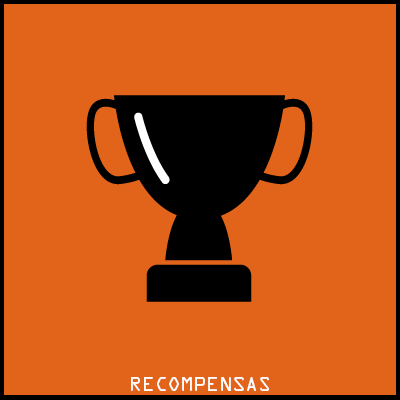
<style>
.page{position:relative;width:400px;height:400px;background:#e2641a}
.page>*{position:absolute;margin:0}
.t1{font:18px "OCRAStd";color:#ffffff}
</style>
<div class="page">
<p class="t1" style="left:131px;top:377px;width:138px;height:14px">RECOMPENSAS</p>
</div>
